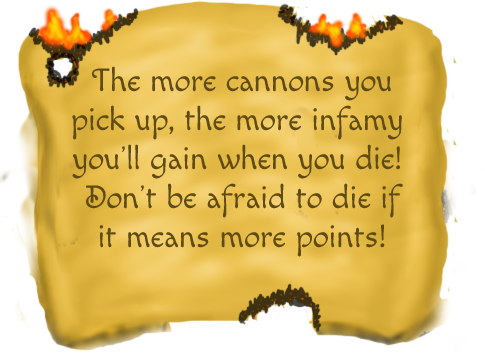
<style>
.page{position:relative;width:485px;height:360px;background:#ffffff}
.page>*{position:absolute;margin:0}
.t1{font:32.5px "MacondoSwashCaps-Regular";color:#604b12}
</style>
<div class="page">
<p class="t1" style="left:72px;top:66px;width:331px;height:191px;text-align:center">The more cannons you<br>pick up, the more infamy <br>you’ll gain when you die! <br>Don’t be afraid to die if<br>it means more points!</p>
</div>
